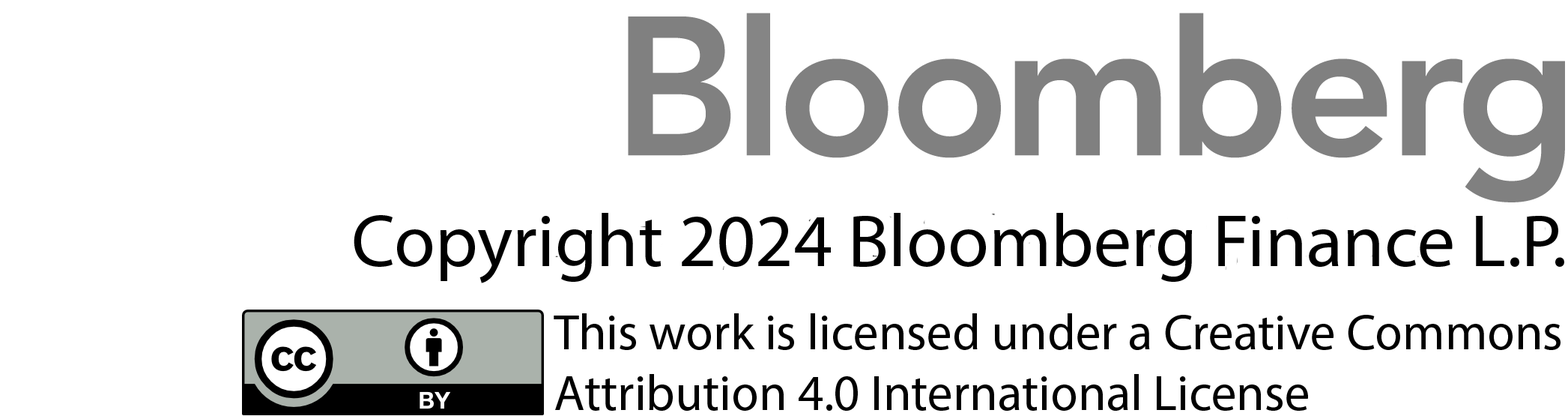
<style>
.page{position:relative;width:1568px;height:416px;background:#ffffff}
.page>*{position:absolute;margin:0}
.t1{font:74.9px "MyriadPro-Regular";color:#000000}
.t2{font:50.5px "MyriadPro-Regular";color:#000000}
</style>
<div class="page">
<p class="t1" style="left:354px;top:213px;width:1210px;height:70px">Copyright 2024 Bloomberg Finance L.P.</p>
<p class="t2" style="left:554px;top:313px;width:1007px;height:98px">This work is licensed under a Creative Commons<br>Attribution 4.0 International License</p>
</div>
